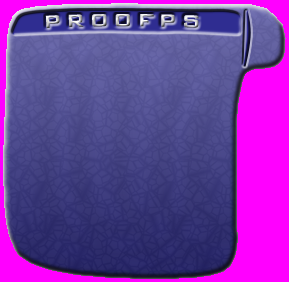
<style>
.page{position:relative;width:289px;height:282px;background:#ff00ff}
.page>*{position:absolute;margin:0}
.t1{font:24px "BankGothicBT-Medium";letter-spacing:0.2em}
</style>
<div class="page">
<p class="t1" style="left:45px;top:14px;width:154px;height:14px">PR00FPS</p>
</div>
